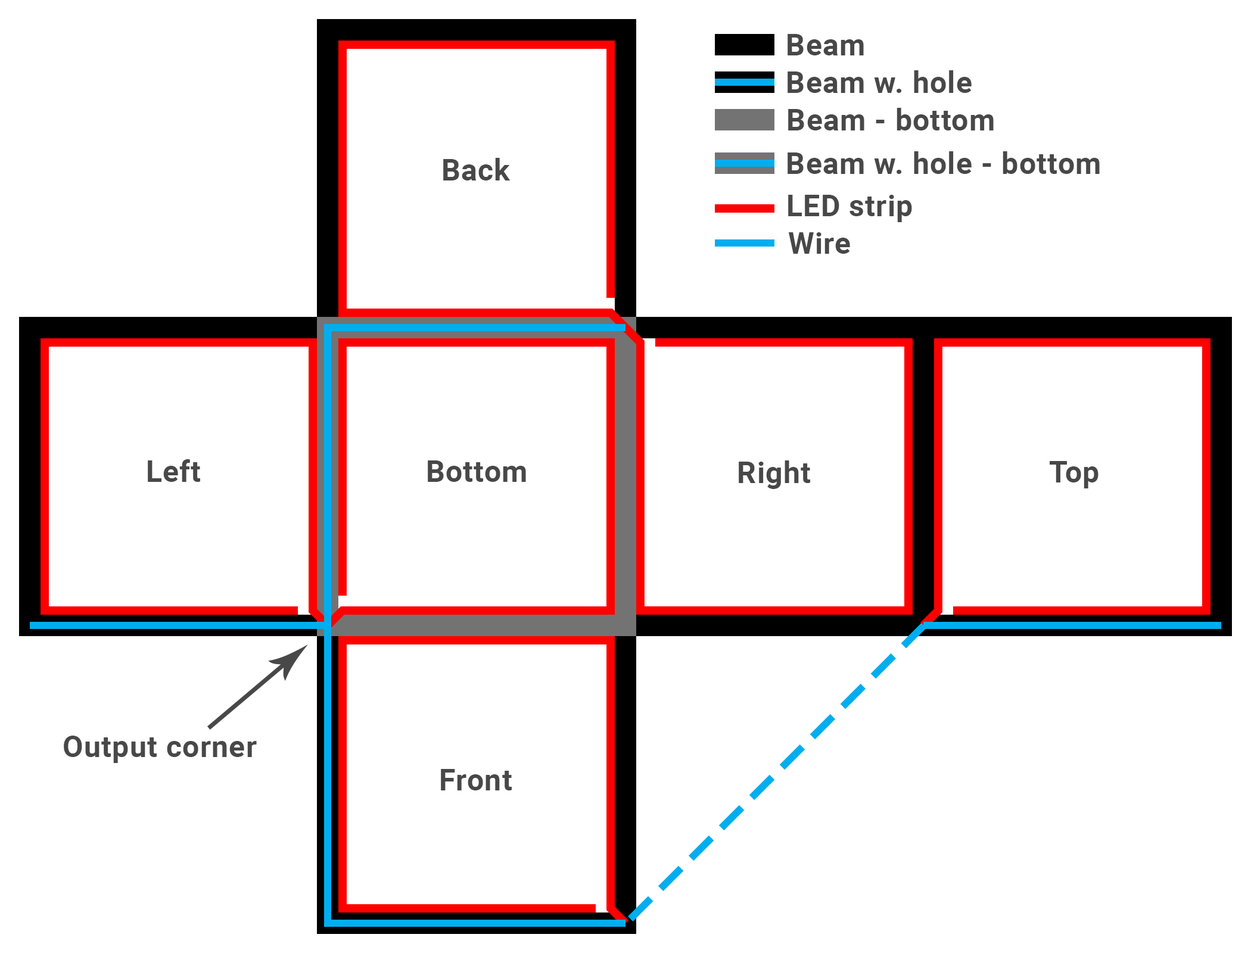
<style>
.page{position:relative;width:1251px;height:953px;background:#ffffff}
.page>*{position:absolute;margin:0}
.t1{font:29.8px "Roboto-Bold";letter-spacing:0.025em;color:#484848}
</style>
<div class="page">
<p class="t1" style="left:788px;top:34px;width:76px;height:21px">Beam</p>
<p class="t1" style="left:788px;top:70px;width:184px;height:23px">Beam w. hole</p>
<p class="t1" style="left:788px;top:108px;width:206px;height:22px">Beam - bottom</p>
<p class="t1" style="left:443px;top:158px;width:68px;height:23px">Back</p>
<p class="t1" style="left:788px;top:151px;width:312px;height:23px">Beam w. hole - bottom</p>
<p class="t1" style="left:788px;top:195px;width:124px;height:27px">LED strip</p>
<p class="t1" style="left:788px;top:232px;width:62px;height:22px">Wire</p>
<p class="t1" style="left:148px;top:459px;width:52px;height:23px">Left</p>
<p class="t1" style="left:428px;top:460px;width:98px;height:22px">Bottom</p>
<p class="t1" style="left:739px;top:460px;width:71px;height:29px">Right</p>
<p class="t1" style="left:1050px;top:461px;width:49px;height:27px">Top</p>
<p class="t1" style="left:64px;top:736px;width:193px;height:27px">Output corner</p>
<p class="t1" style="left:441px;top:769px;width:71px;height:22px">Front</p>
</div>
